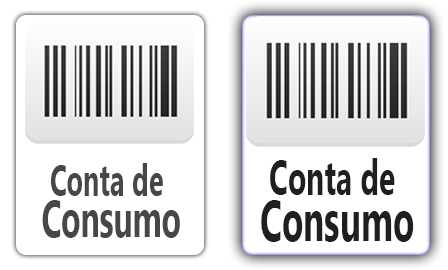
<style>
.page{position:relative;width:448px;height:270px;background:#ffffff}
.page>*{position:absolute;margin:0}
.t1{font:48.6px/46px "NirmalaUI-Bold";color:#1f1f1f;scale:0.62 1}
.t2{font:56.7px/46px "NirmalaUI-Bold";color:#1f1f1f;scale:0.62 1}
.t3{font:43.8px/41.5px "NirmalaUI-Bold";color:#474747;scale:0.62 1}
.t4{font:51.2px/41.5px "NirmalaUI-Bold";color:#474747;scale:0.62 1}
</style>
<div class="page">
<p class="t1" style="left:261px;top:158px;width:153px;height:84px;text-align:center">Conta de<span class="t2"> <br>Consumo</span></p>
<p class="t3" style="left:42px;top:163px;width:138px;height:75px;text-align:center">Conta de<span class="t4"> <br>Consumo</span></p>
</div>
